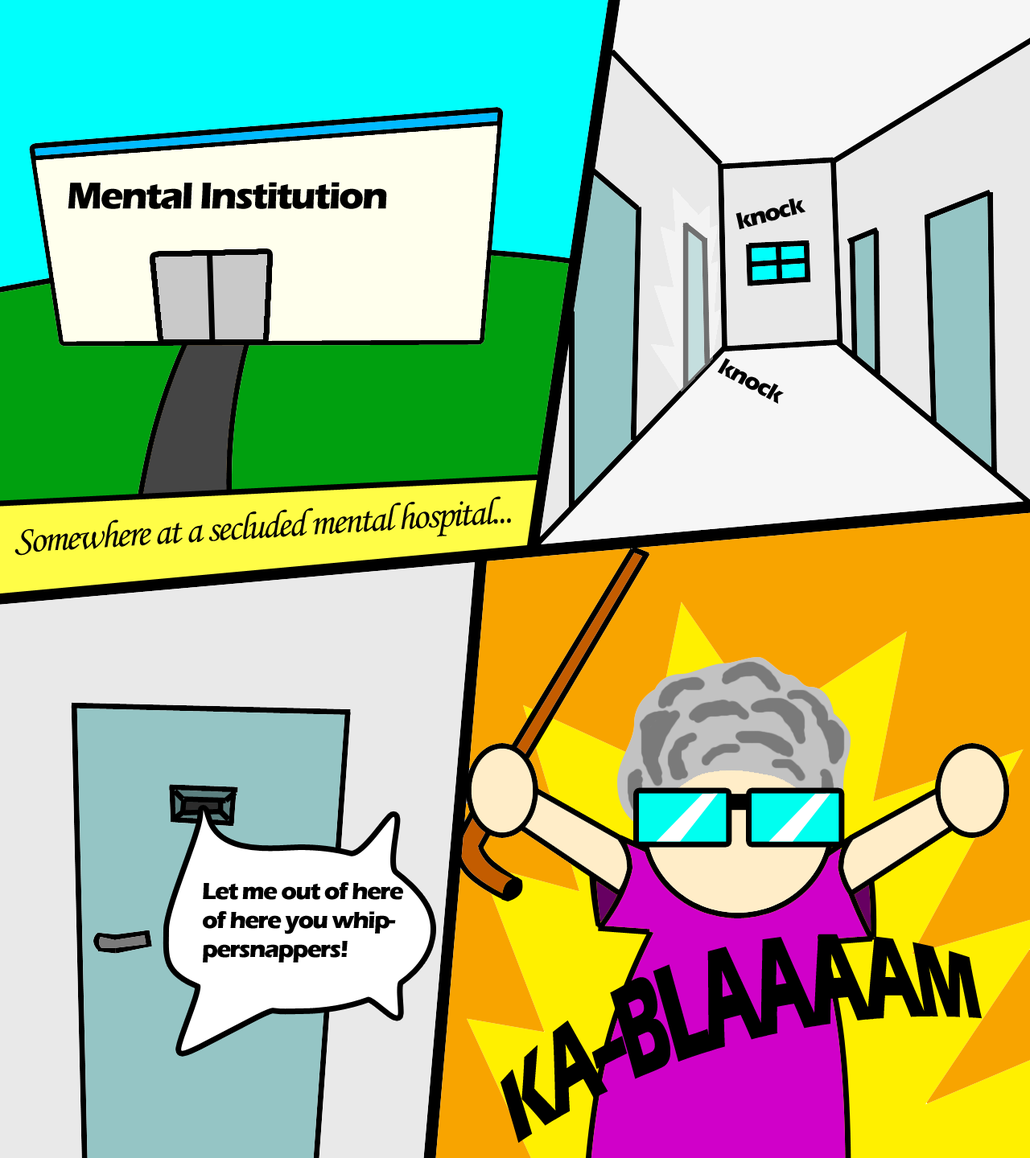
<style>
.page{position:relative;width:1030px;height:1158px}
.page>*{position:absolute;margin:0}
.t1{font:38.6px "ErasITC-Bold";letter-spacing:-0.05em;color:#000000}
.t2{font:24.1px "ErasITC-Bold";letter-spacing:-0.05em;color:#000000}
.t3{font:38.6px "MonotypeCorsiva";letter-spacing:-0.05em;color:#000000}
.t4{font:68.9px "ErasITC-Bold";letter-spacing:-0.05em;color:#000000}
</style>
<div class="page">
<p class="t1" style="left:68px;top:182px;width:319px;height:27px">Mental Institution</p>
<p class="t2" style="left:735px;top:198px;width:71px;height:32px;rotate:-15deg">knock</p>
<p class="t2" style="left:717px;top:358px;width:66px;height:46px;rotate:28deg">knock</p>
<p class="t3" style="left:14px;top:496px;width:497px;height:60px;rotate:-3deg">Somewhere at a secluded mental hospital...</p>
<p class="t2" style="left:203px;top:882px;width:200px;height:81px">Let me out of here of here you whippersnappers!</p>
<p class="t4" style="left:500px;top:934px;width:481px;height:209px;rotate:-15deg">KA--BLAAAAM</p>
</div>
